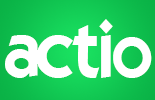
<style>
.page{position:relative;width:155px;height:100px;background:#ffffff}
.page>*{position:absolute;margin:0}
.t1{font:75px "ELEGANCE";color:#ffffff}
</style>
<div class="page">
<p class="t1" style="left:5px;top:19px;width:147px;height:59px">actio</p>
</div>
